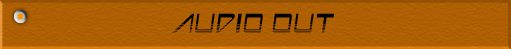
<style>
.page{position:relative;width:511px;height:49px}
.page>*{position:absolute;margin:0}
.t1{font:30px "AstronBoyVideo";letter-spacing:0.05em;color:#000000}
</style>
<div class="page">
<p class="t1" style="left:172px;top:13px;width:162px;height:20px">AUDIO OUT</p>
</div>
